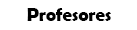
<style>
.page{position:relative;width:137px;height:30px;background:#ffffff}
.page>*{position:absolute;margin:0}
.t1{font:18.7px "BerlinSansFBDemi-Bold";color:#000000}
</style>
<div class="page">
<p class="t1" style="left:27px;top:8px;width:84px;height:13px">Profesores</p>
</div>
